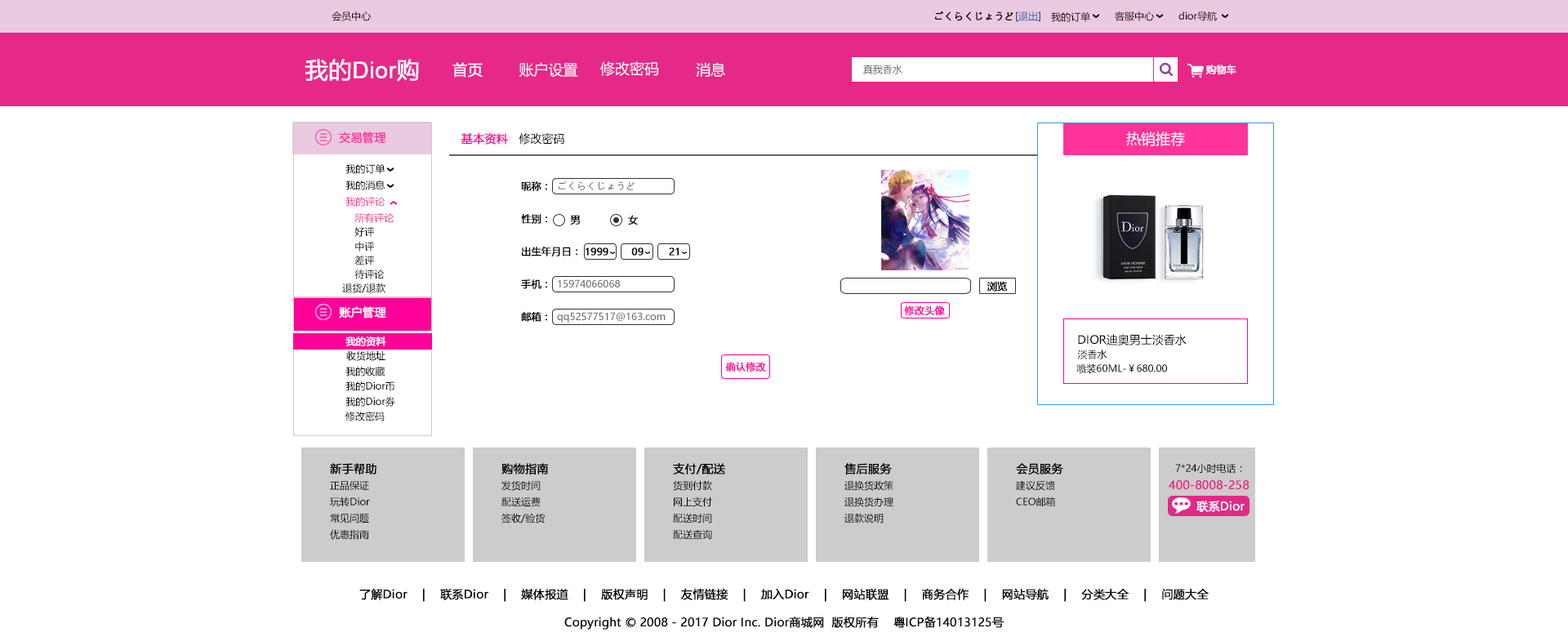
<style>
.page{position:relative;width:1568px;height:637px;background:#ffffff}
.page>*{position:absolute;margin:0}
.t1{font:9.8px "MicrosoftYaHei";color:#040000}
.t2{font:9.8px "MicrosoftYaHei";color:#040000;font-weight:bold}
.t3{font:9.8px "MicrosoftYaHei";color:#2a62ae}
.t4{font:22.9px "ArialMT";color:#ffffff;font-weight:bold}
.t5{font:22.9px "MicrosoftYaHei";color:#ffffff;font-weight:bold}
.t6{font:14.7px "MicrosoftYaHei";color:#ffffff;font-weight:bold}
.t7{font:14.7px "MicrosoftYaHei";color:#ffffff}
.t8{font:9.8px "MicrosoftYaHei";color:#666666}
.t9{font:9.8px "MicrosoftYaHei";color:#ffffff;font-weight:bold}
.t10{font:11.4px "MicrosoftYaHei";color:#ff3399;font-weight:bold}
.t11{font:11.4px "MicrosoftYaHei";color:#ff0099;font-weight:bold}
.t12{font:11.4px "MicrosoftYaHei";color:#000000}
.t13{font:9.8px "MicrosoftYaHei";color:#000000}
.t14{font:9.8px "MicrosoftYaHei";color:#000000;font-weight:bold}
.t15{font:9.8px "MicrosoftYaHei";color:#ff3399}
.t16{font:9.8px "MicrosoftYaHei";color:#e62889}
.t17{font:9.8px "MicrosoftYaHei";color:#ff0099;font-weight:bold}
.t18{font:11.4px "MicrosoftYaHei";color:#ffffff;font-weight:bold}
.t19{font:11.4px "MicrosoftYaHei";color:#040000;font-weight:bold}
.t20{font:11.4px "MicrosoftYaHei";color:#e62889;font-weight:bold}
.t21{font:11.4px "MicrosoftYaHei";color:#000000;font-weight:bold}
</style>
<div class="page">
<p class="t1" style="left:332px;top:11px;width:39px;height:10px">会员中心</p>
<p class="t2" style="left:935px;top:11px;width:78px;height:10px">ごくらくじょうど</p>
<p class="t3" style="left:1016px;top:11px;width:24px;height:10px"><span class="t1">[</span>退出<span class="t1">]</span></p>
<p class="t1" style="left:1051px;top:11px;width:39px;height:11px">我的订单</p>
<p class="t1" style="left:1115px;top:11px;width:39px;height:10px">客服中心</p>
<p class="t1" style="left:1178px;top:11px;width:39px;height:10px">dior导航</p>
<p class="t4" style="left:305px;top:59px;width:114px;height:23px"><span class="t5">我的</span>Dior<span class="t5">购</span></p>
<p class="t6" style="left:452px;top:62px;width:31px;height:16px">首页</p>
<p class="t7" style="left:519px;top:62px;width:59px;height:16px">账户设置</p>
<p class="t7" style="left:600px;top:61px;width:59px;height:15px">修改密码</p>
<p class="t7" style="left:696px;top:62px;width:30px;height:15px">消息</p>
<p class="t8" style="left:863px;top:65px;width:39px;height:9px">真我香水</p>
<p class="t9" style="left:1205px;top:65px;width:31px;height:10px">购物车</p>
<p class="t10" style="left:339px;top:131px;width:47px;height:13px">交易管理</p>
<p class="t11" style="left:461px;top:133px;width:47px;height:12px">基本资料</p>
<p class="t12" style="left:519px;top:133px;width:45px;height:12px">修改密码</p>
<p class="t7" style="left:1126px;top:131px;width:59px;height:15px">热销推荐</p>
<p class="t13" style="left:345px;top:163px;width:40px;height:11px">我的订单</p>
<p class="t13" style="left:345px;top:180px;width:40px;height:10px">我的消息</p>
<p class="t14" style="left:521px;top:181px;width:26px;height:10px">昵称：</p>
<p class="t8" style="left:559px;top:181px;width:76px;height:9px">ごくらくじょうど</p>
<p class="t15" style="left:345px;top:197px;width:40px;height:10px">我的评论</p>
<p class="t16" style="left:354px;top:213px;width:40px;height:10px">所有评论</p>
<p class="t14" style="left:521px;top:214px;width:26px;height:10px">性别：</p>
<p class="t14" style="left:570px;top:215px;width:10px;height:10px">男</p>
<p class="t14" style="left:628px;top:215px;width:11px;height:10px">女</p>
<p class="t1" style="left:354px;top:227px;width:20px;height:10px">好评</p>
<p class="t1" style="left:355px;top:242px;width:19px;height:10px">中评</p>
<p class="t14" style="left:522px;top:246px;width:55px;height:10px">出生年月日：</p>
<p class="t1" style="left:354px;top:255px;width:20px;height:10px">差评</p>
<p class="t14" style="left:586px;top:247px;width:22px;height:9px">1999</p>
<p class="t14" style="left:631px;top:247px;width:13px;height:9px">09</p>
<p class="t14" style="left:669px;top:247px;width:10px;height:9px">21</p>
<p class="t1" style="left:354px;top:270px;width:31px;height:9px">待评论</p>
<p class="t14" style="left:521px;top:279px;width:26px;height:10px">手机：</p>
<p class="t8" style="left:558px;top:279px;width:62px;height:8px">15974066068</p>
<p class="t14" style="left:987px;top:281px;width:21px;height:11px">浏览</p>
<p class="t13" style="left:342px;top:283px;width:43px;height:10px">退货/退款</p>
<p class="t17" style="left:904px;top:305px;width:41px;height:11px">修改头像</p>
<p class="t18" style="left:339px;top:306px;width:47px;height:12px">账户管理</p>
<p class="t14" style="left:521px;top:312px;width:26px;height:10px">邮箱：</p>
<p class="t8" style="left:557px;top:312px;width:109px;height:11px">qq52577517@163.com</p>
<p class="t9" style="left:345px;top:336px;width:41px;height:10px">我的资料</p>
<p class="t12" style="left:1078px;top:334px;width:109px;height:11px">DIOR迪奥男士淡香水</p>
<p class="t1" style="left:346px;top:351px;width:39px;height:10px">收货地址</p>
<p class="t13" style="left:1077px;top:350px;width:30px;height:9px">淡香水</p>
<p class="t17" style="left:725px;top:362px;width:41px;height:10px">确认修改</p>
<p class="t13" style="left:1076px;top:363px;width:91px;height:11px">喷装60ML-￥680.00</p>
<p class="t1" style="left:345px;top:367px;width:40px;height:9px">我的收藏</p>
<p class="t13" style="left:345px;top:381px;width:49px;height:10px">我的Dior币</p>
<p class="t13" style="left:345px;top:397px;width:50px;height:10px">我的Dior券</p>
<p class="t13" style="left:345px;top:412px;width:40px;height:9px">修改密码</p>
<p class="t19" style="left:330px;top:463px;width:46px;height:11px">新手帮助</p>
<p class="t19" style="left:501px;top:463px;width:48px;height:11px">购物指南</p>
<p class="t19" style="left:673px;top:463px;width:52px;height:11px">支付/配送</p>
<p class="t19" style="left:844px;top:463px;width:48px;height:11px">售后服务</p>
<p class="t19" style="left:1016px;top:463px;width:47px;height:11px">会员服务</p>
<p class="t1" style="left:1175px;top:463px;width:67px;height:11px">7*24小时电话：</p>
<p class="t1" style="left:330px;top:481px;width:39px;height:10px">正品保证</p>
<p class="t1" style="left:501px;top:480px;width:40px;height:11px">发货时间</p>
<p class="t1" style="left:673px;top:480px;width:39px;height:11px">货到付款</p>
<p class="t1" style="left:844px;top:480px;width:49px;height:11px">退换货政策</p>
<p class="t1" style="left:1016px;top:480px;width:39px;height:11px">建议反馈</p>
<p class="t20" style="left:1169px;top:480px;width:81px;height:10px">400-8008-258</p>
<p class="t1" style="left:330px;top:497px;width:40px;height:10px">玩转Dior</p>
<p class="t1" style="left:501px;top:497px;width:40px;height:10px">配送运费</p>
<p class="t1" style="left:674px;top:497px;width:38px;height:10px">网上支付</p>
<p class="t1" style="left:844px;top:497px;width:49px;height:10px">退换货办理</p>
<p class="t1" style="left:1016px;top:497px;width:40px;height:10px">CEO邮箱</p>
<p class="t18" style="left:1196px;top:501px;width:49px;height:11px">联系Dior</p>
<p class="t1" style="left:330px;top:513px;width:39px;height:10px">常见问题</p>
<p class="t1" style="left:501px;top:513px;width:44px;height:10px">签收/验货</p>
<p class="t1" style="left:673px;top:513px;width:39px;height:10px">配送时间</p>
<p class="t1" style="left:844px;top:513px;width:40px;height:10px">退款说明</p>
<p class="t1" style="left:330px;top:529px;width:39px;height:11px">优惠指南</p>
<p class="t1" style="left:673px;top:529px;width:39px;height:10px">配送查询</p>
<p class="t19" style="left:359px;top:588px;width:850px;height:14px">了解Dior    |    联系Dior    |    媒体报道    |    版权声明    |    友情链接    |    加入Dior    |    网站联盟    |    商务合作    |    网站导航    |    分类大全    |    问题大全</p>
<p class="t21" style="left:564px;top:616px;width:440px;height:14px">Copyright © 2008 - 2017 Dior Inc. Dior商城网  版权所有    粤ICP备14013125号</p>
</div>
